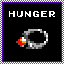
<style>
.page{position:relative;width:64px;height:64px;background:#000000}
.page>*{position:absolute;margin:0}
.t1{font:8px "Early-GameBoy";color:#ffffff}
</style>
<div class="page">
<p class="t1" style="left:9px;top:11px;width:46px;height:6px">HUNGER</p>
</div>
